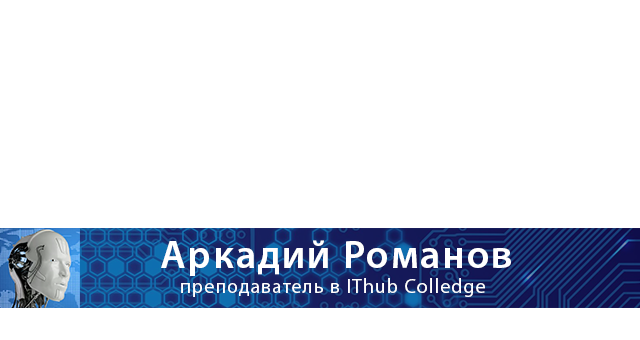
<style>
.page{position:relative;width:640px;height:340px;background:#ffffff}
.page>*{position:absolute;margin:0}
.t1{font:40px "MyriadPro-Semibold";letter-spacing:0.05em;color:#ffffff}
.t2{font:20px "MyriadPro-Regular";letter-spacing:0.05em;color:#ffffff}
</style>
<div class="page">
<p class="t1" style="left:161px;top:240px;width:350px;height:36px">Аркадий Романов</p>
<p class="t2" style="left:181px;top:278px;width:304px;height:19px">преподаватель в IThub Colledge</p>
</div>
